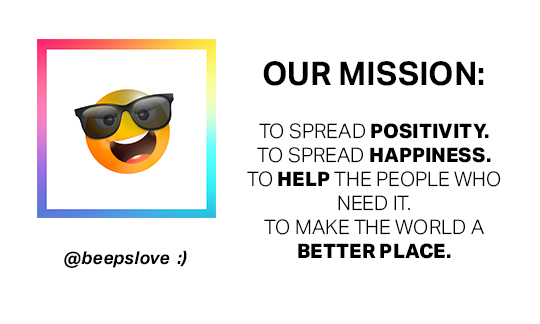
<style>
.page{position:relative;width:540px;height:324px;background:#ffffff}
.page>*{position:absolute;margin:0}
.t1{font:32.7px "AktivGrotesk-Bold";color:#000000}
.t2{font:20px "AktivGrotesk-Light";color:#000000}
.t3{font:20px "AktivGrotesk-XBold";color:#000000}
.t4{font:17.9px "AktivGrotesk-BoldItalic";color:#000000}
</style>
<div class="page">
<p class="t1" style="left:263px;top:61px;width:221px;height:25px">OUR MISSION:</p>
<p class="t2" style="left:247px;top:123px;width:254px;height:136px;text-align:center">TO SPREAD <span class="t3">POSITIVITY.<br></span>TO SPREAD <span class="t3">HAPPINESS.<br></span>TO <span class="t3">HELP</span> THE PEOPLE WHO NEED IT.<br>TO MAKE THE WORLD A <span class="t3">BETTER PLACE.</span></p>
<p class="t4" style="left:64px;top:250px;width:123px;height:18px">@beepslove  :)</p>
</div>
